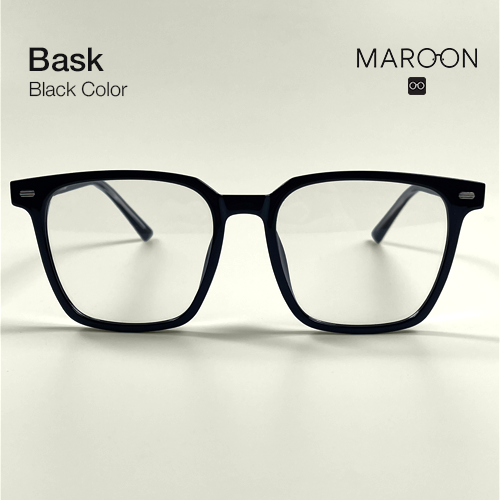
<style>
.page{position:relative;width:500px;height:500px}
.page>*{position:absolute;margin:0}
.t1{font:33px "HelveticaNeue-Medium";color:#131315}
.t2{font:19.8px "HelveticaNeue-Light";color:#131315}
</style>
<div class="page">
<p class="t1" style="left:29px;top:47px;width:75px;height:25px">Bask</p>
<p class="t2" style="left:29px;top:81px;width:99px;height:16px">Black Color</p>
</div>
